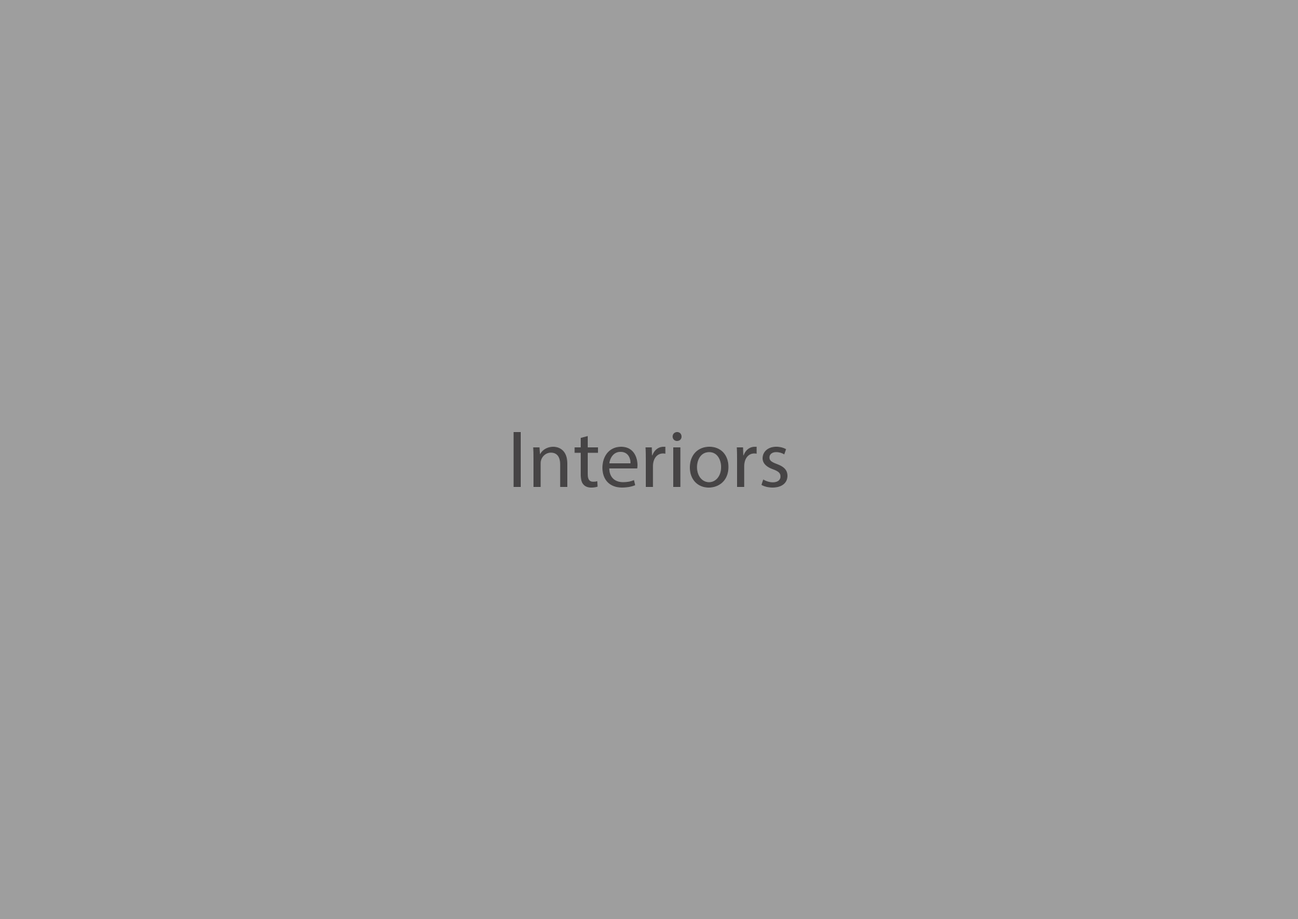
<style>
.page{position:relative;width:1298px;height:919px;background:#9e9e9e}
.page>*{position:absolute;margin:0}
.t1{font:81.7px "MyriadPro-Regular";color:#464445}
</style>
<div class="page">
<p class="t1" style="left:513px;top:431px;width:274px;height:56px">Interiors</p>
</div>
